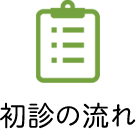
<style>
.page{position:relative;width:136px;height:129px;background:#ffffff}
.page>*{position:absolute;margin:0}
.t1{font:28px "TBChibiRGoPlusKPro-Regular";color:#000000}
</style>
<div class="page">
<p class="t1" style="left:0px;top:102px;width:136px;height:27px">初診の流れ</p>
</div>
